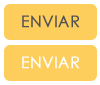
<style>
.page{position:relative;width:100px;height:85px;background:#fece5c}
.page>*{position:absolute;margin:0}
.t1{font:16px "CenturyGothic";color:#525252;font-weight:bold}
.t2{font:16px "CenturyGothic";color:#ffffff;font-weight:bold}
</style>
<div class="page">
<p class="t1" style="left:22px;top:15px;width:58px;height:13px">ENVIAR</p>
<p class="t2" style="left:22px;top:56px;width:58px;height:13px">ENVIAR</p>
</div>
